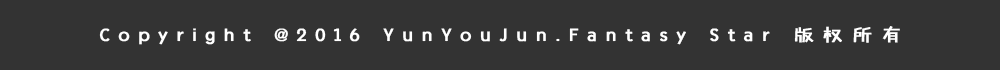
<style>
.page{position:relative;width:1000px;height:70px;background:#333333}
.page>*{position:absolute;margin:0}
.t1{font:20.8px "FZJHJW--GB1-0";letter-spacing:0.38em;color:#ffffff;font-weight:bold}
</style>
<div class="page">
<p class="t1" style="left:99px;top:26px;width:801px;height:19px">Copyright @2016 YunYouJun.Fantasy Star 版权所有</p>
</div>
